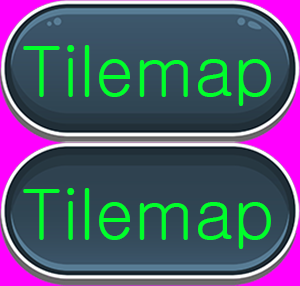
<style>
.page{position:relative;width:300px;height:286px}
.page>*{position:absolute;margin:0}
.t1{font:69.5px "Gulim";color:#00ff2a}
</style>
<div class="page">
<p class="t1" style="left:23px;top:45px;width:248px;height:61px">Tilemap</p>
<p class="t1" style="left:23px;top:188px;width:248px;height:61px">Tilemap</p>
</div>
